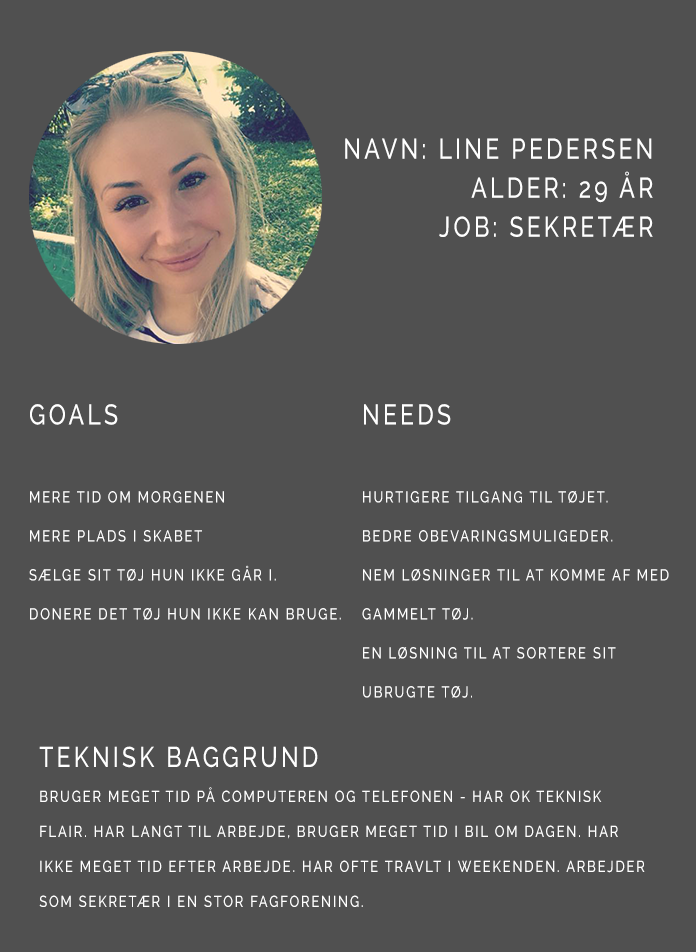
<style>
.page{position:relative;width:696px;height:952px;background:#505050}
.page>*{position:absolute;margin:0}
.t1{font:28.5px/39px "Raleway-Medium";letter-spacing:0.14em;color:#ffffff;text-transform:uppercase;scale:0.81 1}
.t2{font:16.1px/39px "Raleway-Medium";letter-spacing:0.14em;color:#ffffff;text-transform:uppercase;scale:0.81 1}
.t3{font:16.1px/35px "Raleway-Medium";letter-spacing:0.14em;color:#ffffff;text-transform:uppercase;scale:0.81 1}
</style>
<div class="page">
<p class="t1" style="left:345px;top:138px;width:308px;height:99px;text-align:right">Navn: Line Pedersen<br>alder: 29 år<br>Job: sekretær</p>
<p class="t2" style="left:29px;top:404px;width:312px;height:216px"><span class="t1">Goals<br><br></span>Mere tid om morgenen<br>Mere plads i skabet<br>Sælge sit tøj hun ikke går i. Donere det tøj hun ikke kan bruge.</p>
<p class="t2" style="left:362px;top:404px;width:307px;height:294px"><span class="t1">Needs<br><br></span>Hurtigere tilgang til tøjet.<br>Bedre obevaringsmuligeder.<br>Nem løsninger til at komme af med gammelt tøj.<br>En løsning til at sortere sit ubrugte tøj.</p>
<p class="t3" style="left:39px;top:746px;width:606px;height:161px"><span class="t1">Teknisk baggrund<br></span>Bruger meget tid på computeren og telefonen - har OK teknisk flair. Har langt til arbejde, bruger meget tid i bil om dagen. Har ikke meget tid efter arbejde. Har ofte travlt i weekenden. Arbejder som sekretær i en stor fagforening.</p>
</div>
